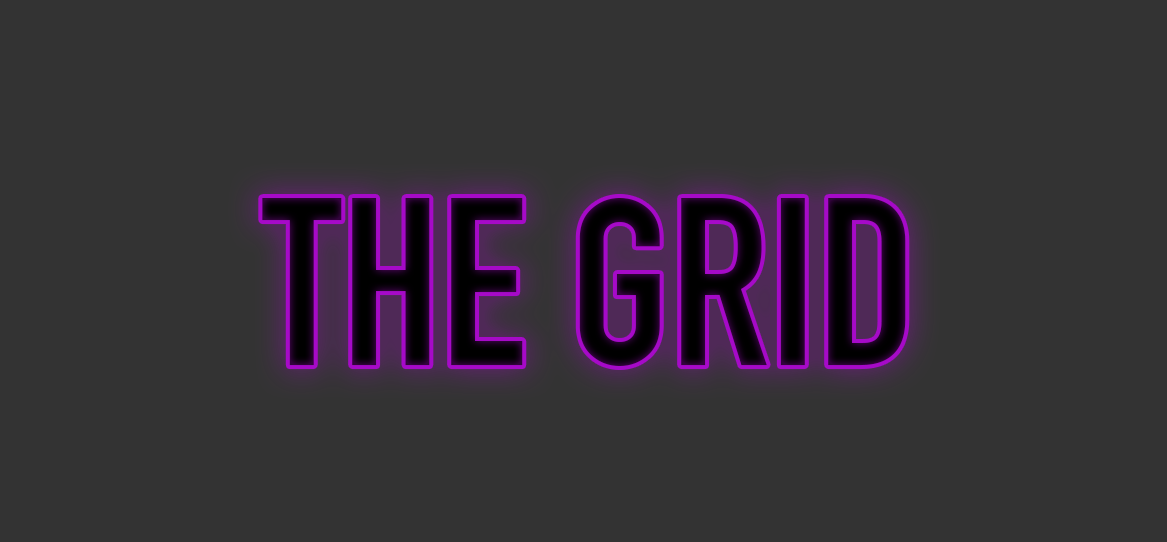
<style>
.page{position:relative;width:1167px;height:542px;background:#333333}
.page>*{position:absolute;margin:0}
.t1{font:233.7px "DINEngschrift";color:#080009}
</style>
<div class="page">
<p class="t1" style="left:262px;top:198px;width:644px;height:168px">THE GRID</p>
</div>
